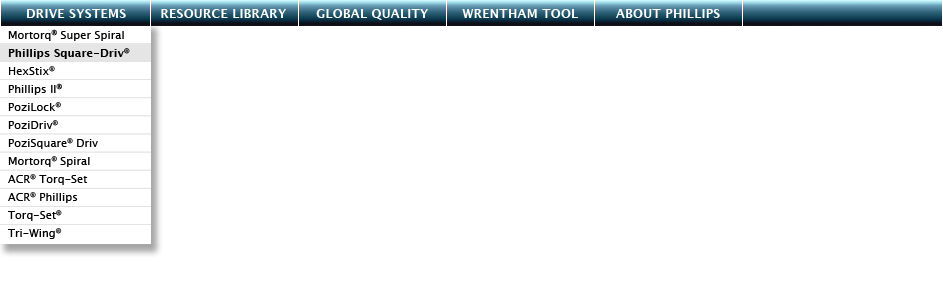
<style>
.page{position:relative;width:943px;height:300px;background:#ffffff}
.page>*{position:absolute;margin:0}
.t1{font:12px "LucidaGrande-Bold";letter-spacing:0.025em;color:#ffffff;text-transform:uppercase}
.t2{font:11px/18px "LucidaGrande";letter-spacing:0.005em;color:#000000}
.t3{font:11px/18px "LucidaGrande-Bold";letter-spacing:0.005em;color:#000000}
</style>
<div class="page">
<p class="t1" style="left:27px;top:9px;width:693px;height:11px">DRIVE SYSTEMS        RESOURCE LIBRARY       global quality   wrentham tool         about phillips</p>
<p class="t2" style="left:8px;top:29px;width:122px;height:210px">Mortorq® Super Spiral<br><span class="t3">Phillips Square-Driv®<br></span>HexStix<span class="t3">®<br></span>Phillips II®<br>PoziLock<span class="t3">®<br></span>PoziDriv<span class="t3">®<br></span>PoziSquare<span class="t3">®</span> Driv<br>Mortorq<span class="t3">®</span> Spiral<br>ACR<span class="t3">®</span> Torq-Set<br>ACR<span class="t3">®</span> Phillips<br>Torq-Set<span class="t3">®</span><br>Tri-Wing<span class="t3">®</span></p>
</div>
